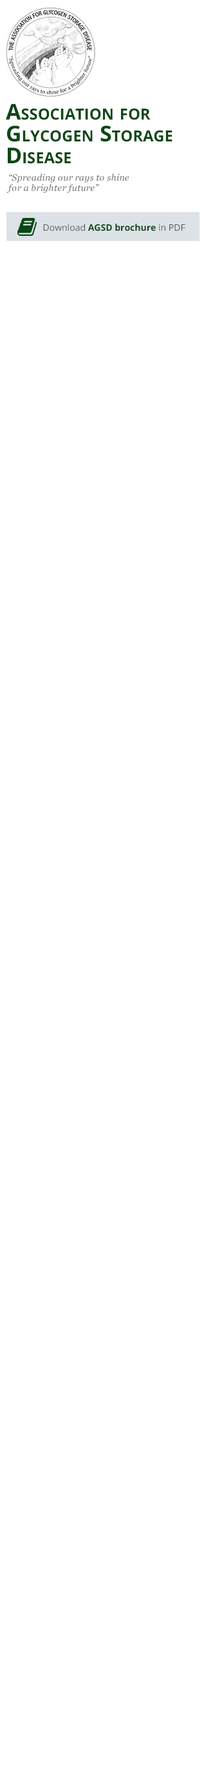
<style>
.page{position:relative;width:206px;height:1783px;background:#ffffff}
.page>*{position:absolute;margin:0}
.t1{font:21.9px/21.9px "OpenSans-Bold";color:#0a4815;font-variant:small-caps}
.t2{font:9px/10.3px "Georgia-Italic";letter-spacing:0.025em;color:#696d71}
.t3{font:9px "OpenSans-Bold";color:#0a4815}
.t4{font:9px "OpenSans";color:#575b60}
</style>
<div class="page">
<p class="t1" style="left:6px;top:104px;width:166px;height:60px">Association for <br>Glycogen Storage <br>Disease</p>
<p class="t2" style="left:6px;top:174px;width:123px;height:19px">“Spreading our rays to shine <br>for a brighter future”</p>
<p class="t3" style="left:43px;top:224px;width:142px;height:7px"><span class="t4">Download </span>AGSD brochure <span class="t4">in PDF</span></p>
</div>
